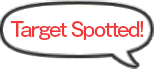
<style>
.page{position:relative;width:154px;height:69px;background:#ffffff}
.page>*{position:absolute;margin:0}
.t1{font:19px "GothicMB101Pro-Medium";letter-spacing:-0.08em;color:#f13738;scale:0.95 1}
</style>
<div class="page">
<p class="t1" style="left:10px;top:21px;width:133px;height:19px">Target Spotted!</p>
</div>
